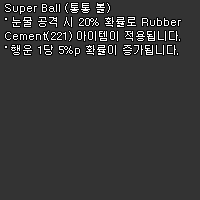
<style>
.page{position:relative;width:200px;height:200px;background:#333333}
.page>*{position:absolute;margin:0}
.t1{font:11px/14px "Dotum";color:#ffffff}
</style>
<div class="page">
<p class="t1" style="left:5px;top:3px;width:176px;height:53px">Super Ball (통통 볼)<br>˚ 눈물 공격 시 20% 확률로 Rubber <br>Cement(221) 아이템이 적용됩니다.<br>˚ 행운 1당 5%p 확률이 증가됩니다.</p>
</div>
